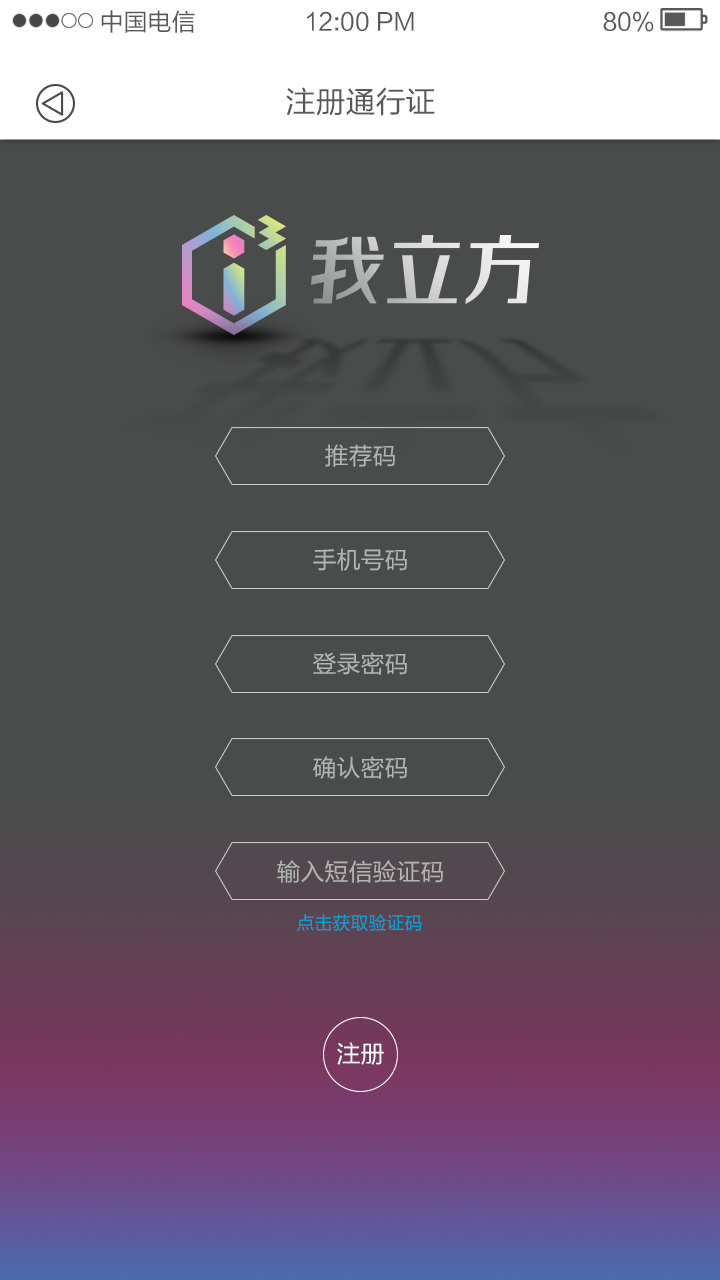
<style>
.page{position:relative;width:720px;height:1280px;background:#4a4c4b}
.page>*{position:absolute;margin:0}
.t1{font:24px "FZLTHK--GBK1-0";color:#595757}
.t2{font:30px "FZLTHK--GBK1-0";color:#595757}
.t3{font:24px/104px "FZLTHK--GBK1-0";color:#b2b5b4}
.t4{font:18px "FZLTHK--GBK1-0";color:#00a3db}
.t5{font:24px "FZLTHK--GBK1-0";color:#ffffff}
</style>
<div class="page">
<p class="t1" style="left:101px;top:10px;width:94px;height:23px">中国电信</p>
<p class="t1" style="left:307px;top:11px;width:107px;height:20px">12:00 PM</p>
<p class="t1" style="left:603px;top:11px;width:51px;height:21px">80%</p>
<p class="t2" style="left:286px;top:87px;width:149px;height:29px">注册通行证</p>
<p class="t3" style="left:277px;top:444px;width:166px;height:439px;text-align:center">推荐码<br>手机号码<br>登录密码<br>确认密码<br>输入短信验证码</p>
<p class="t4" style="left:297px;top:914px;width:125px;height:18px">点击获取验证码</p>
<p class="t5" style="left:337px;top:1042px;width:47px;height:23px">注册</p>
</div>
